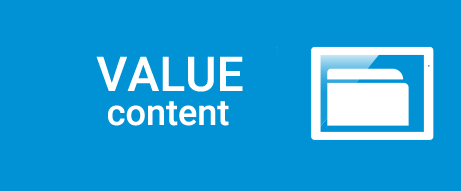
<style>
.page{position:relative;width:461px;height:191px;background:#0092d5}
.page>*{position:absolute;margin:0}
.t1{font:48px "Roboto-Medium";color:#ffffff}
.t2{font:36px "Roboto-Medium";color:#ffffff}
</style>
<div class="page">
<p class="t1" style="left:96px;top:56px;width:147px;height:36px">VALUE</p>
<p class="t2" style="left:108px;top:101px;width:121px;height:25px">content</p>
</div>
